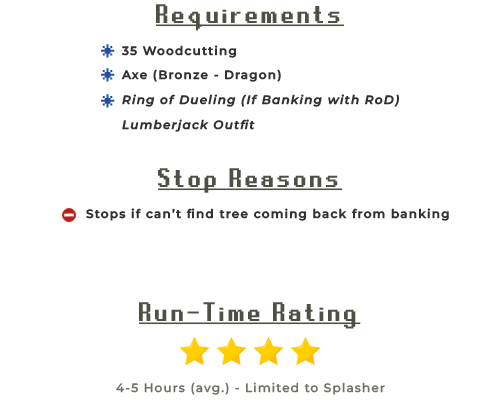
<style>
.page{position:relative;width:500px;height:400px;background:#ffffff}
.page>*{position:absolute;margin:0}
.t1{font:30px "RuneScape-UF";letter-spacing:0.1em;color:#504f46;text-decoration:underline}
.t2{font:30px "RuneScape-UF";letter-spacing:0.1em;color:#21509e}
.t3{font:12px "MontserratRoman-SemiBold";letter-spacing:0.1em;color:#313131}
.t4{font:12px "MontserratItalic-SemiBoldItalic";letter-spacing:0.1em;color:#313131}
.t5{font:12px "MontserratRoman-Medium";letter-spacing:0.1em;color:#717067}
</style>
<div class="page">
<p class="t1" style="left:156px;top:4px;width:188px;height:27px">Requirements</p>
<p class="t2" style="left:101px;top:44px;width:14px;height:14px">*</p>
<p class="t3" style="left:122px;top:45px;width:114px;height:13px">35 Woodcutting</p>
<p class="t2" style="left:101px;top:68px;width:14px;height:14px">*</p>
<p class="t3" style="left:121px;top:69px;width:160px;height:13px">Axe (Bronze - Dragon)</p>
<p class="t2" style="left:101px;top:94px;width:14px;height:14px">*</p>
<p class="t4" style="left:122px;top:94px;width:277px;height:13px">Ring of Dueling (If Banking with RoD)</p>
<p class="t4" style="left:122px;top:119px;width:133px;height:13px">Lumberjack Outfit</p>
<p class="t1" style="left:158px;top:168px;width:185px;height:25px">Stop Reasons</p>
<p class="t3" style="left:86px;top:208px;width:363px;height:13px">Stops if can’t find tree coming back from banking</p>
<p class="t1" style="left:139px;top:302px;width:222px;height:27px">Run-Time Rating</p>
<p class="t5" style="left:116px;top:382px;width:269px;height:13px">4-5 Hours (avg.) - Limited to Splasher</p>
</div>
